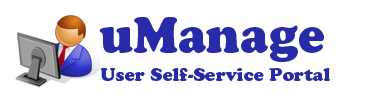
<style>
.page{position:relative;width:370px;height:100px;background:#ffffff}
.page>*{position:absolute;margin:0}
.t1{font:48px "CooperBlackStd";color:#272ba7}
.t2{font:18px "CooperBlackStd";color:#272ba7}
</style>
<div class="page">
<p class="t1" style="left:99px;top:17px;width:225px;height:45px">uManage</p>
<p class="t2" style="left:100px;top:68px;width:230px;height:13px">User Self-Service Portal</p>
</div>
